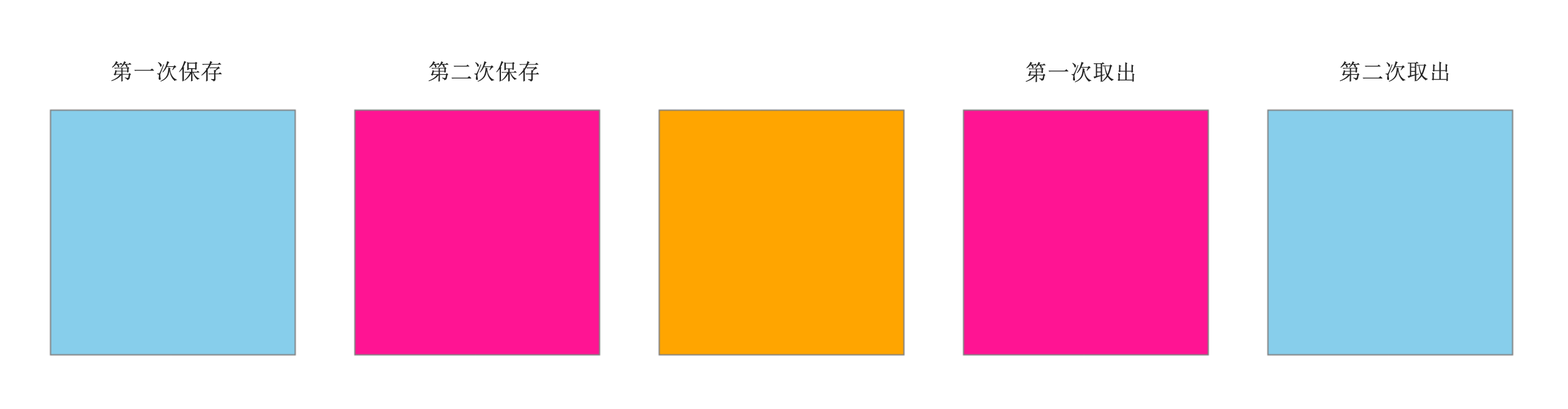
<style>
.page{position:relative;width:1568px;height:409px;background:#ffffff}
.page>*{position:absolute;margin:0}
.t1{font:21.9px "SimSun";color:#252525;font-weight:bold}
</style>
<div class="page">
<p class="t1" style="left:111px;top:61px;width:111px;height:21px">第一次保存</p>
<p class="t1" style="left:429px;top:61px;width:110px;height:21px">第二次保存</p>
<p class="t1" style="left:1026px;top:61px;width:109px;height:22px">第一次取出</p>
<p class="t1" style="left:1340px;top:61px;width:109px;height:21px">第二次取出</p>
</div>
